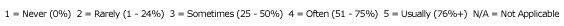
<style>
.page{position:relative;width:564px;height:26px;background:#ffffff}
.page>*{position:absolute;margin:0}
.t1{font:9px "Verdana";letter-spacing:-0.05em}
</style>
<div class="page">
<p class="t1" style="left:5px;top:10px;width:554px;height:9px">1 = Never (0%)  2 = Rarely (1 - 24%)  3 = Sometimes (25 - 50%)  4 = Often (51 - 75%)  5 = Usually (76%+)  N/A = Not Applicable</p>
</div>
